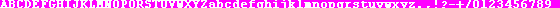
<style>
.page{position:relative;width:560px;height:8px;background:#ff00ff}
.page>*{position:absolute;margin:0}
.t1{font:12px "CourierNewPSMT";color:#ffffff;font-weight:bold}
</style>
<div class="page">
<p class="t1" style="left:0px;top:0px;width:551px;height:10px">ABCDEFGHIJKLMNOPQRSTUVWXYZabcdefghijklmnopqrstuvwxyz.,!?-+/0123456789</p>
</div>
